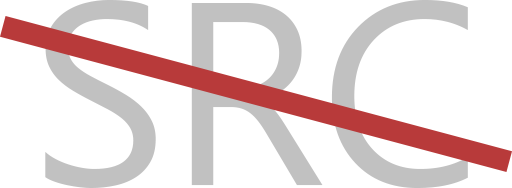
<style>
.page{position:relative;width:512px;height:188px;background:#ffffff}
.page>*{position:absolute;margin:0}
.t1{font:260px "SegoeUI";color:#c1c1c1}
</style>
<div class="page">
<p class="t1" style="left:45px;top:0px;width:423px;height:188px">SRC</p>
</div>
